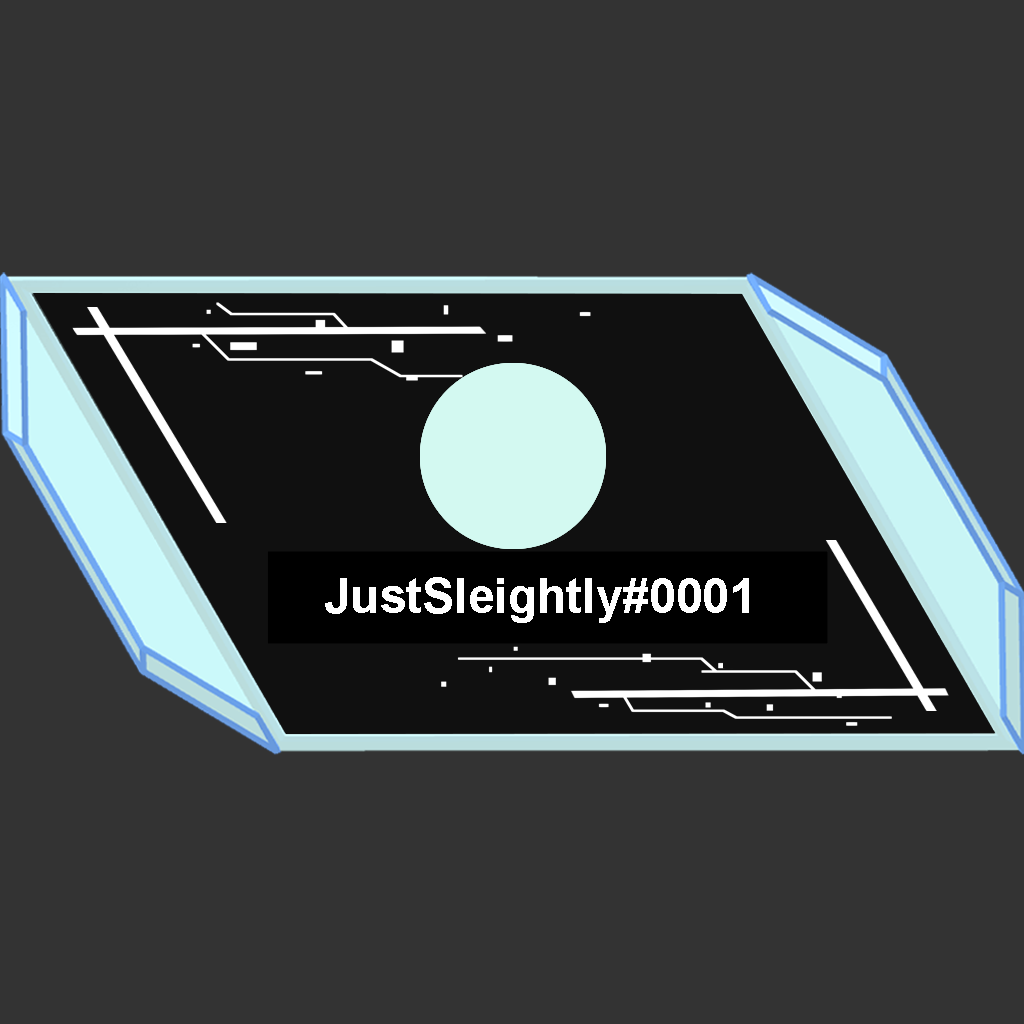
<style>
.page{position:relative;width:1024px;height:1024px;background:#333333}
.page>*{position:absolute;margin:0}
.t1{font:48px "Arial-BoldMT";color:#ffffff}
</style>
<div class="page">
<p class="t1" style="left:325px;top:577px;width:424px;height:46px">JustSleightly#0001</p>
</div>
